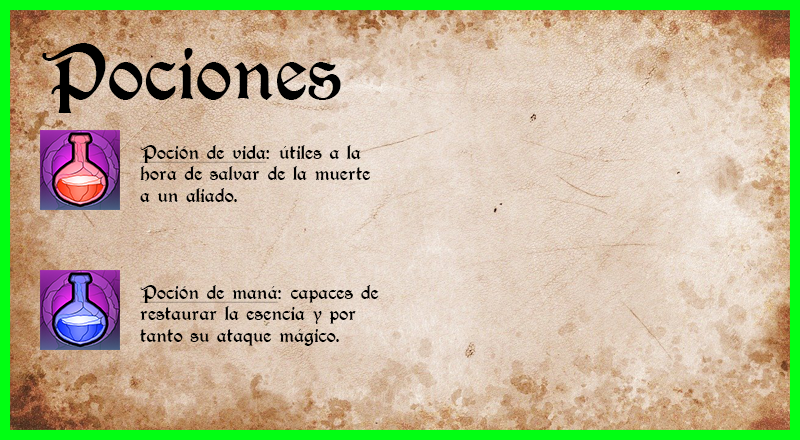
<style>
.page{position:relative;width:800px;height:440px}
.page>*{position:absolute;margin:0}
.t1{font:72px "T4C-Beaulieux";color:#000000}
.t2{font:18px "T4C-Beaulieux";color:#000000}
.t3{font:18px "T4C-Beaulieux";color:#000000;text-decoration:underline}
</style>
<div class="page">
<p class="t1" style="left:42px;top:43px;width:299px;height:70px">Pociones</p>
<p class="t2" style="left:140px;top:145px;width:231px;height:57px"><span class="t3">Poción de vida</span>: útiles a la hora de salvar de la muerte a un aliado.</p>
<p class="t2" style="left:140px;top:285px;width:239px;height:61px"><span class="t3">Poción de maná</span>: capaces de restaurar la esencia y por tanto su ataque mágico.</p>
</div>
